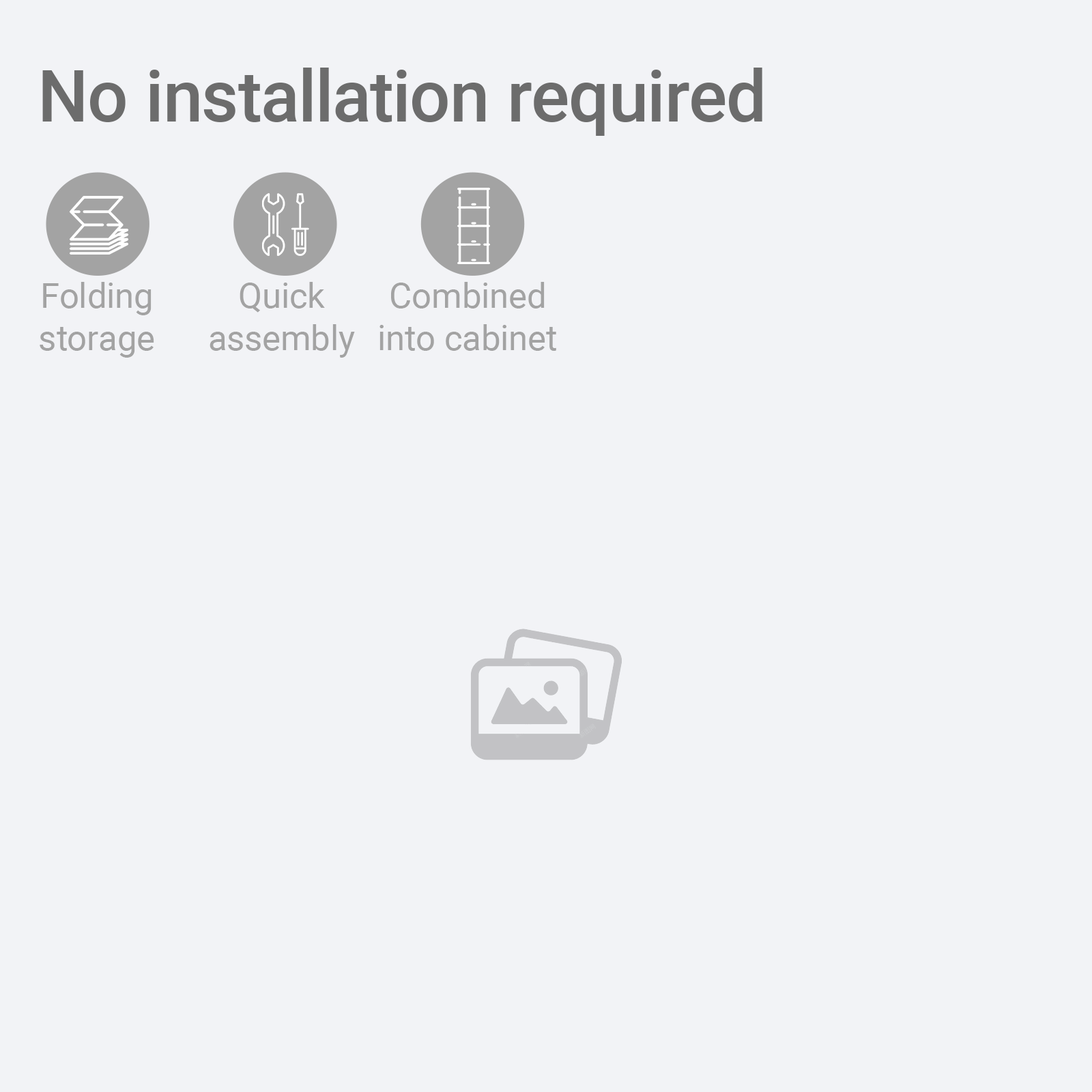
<style>
.page{position:relative;width:1092px;height:1092px;background:#f2f3f6}
.page>*{position:absolute;margin:0}
.t1{font:71.3px "Roboto-Medium";color:#6c6c6c}
.t2{font:34.9px "Roboto-Regular";color:#a3a3a3}
</style>
<div class="page">
<p class="t1" style="left:42px;top:68px;width:720px;height:68px">No installation required</p>
<p class="t2" style="left:40px;top:282px;width:114px;height:76px;text-align:center">Folding<br>storage</p>
<p class="t2" style="left:210px;top:282px;width:145px;height:76px;text-align:center">Quick<br>assembly</p>
<p class="t2" style="left:379px;top:282px;width:177px;height:69px;text-align:center">Combined<br>into cabinet</p>
</div>
